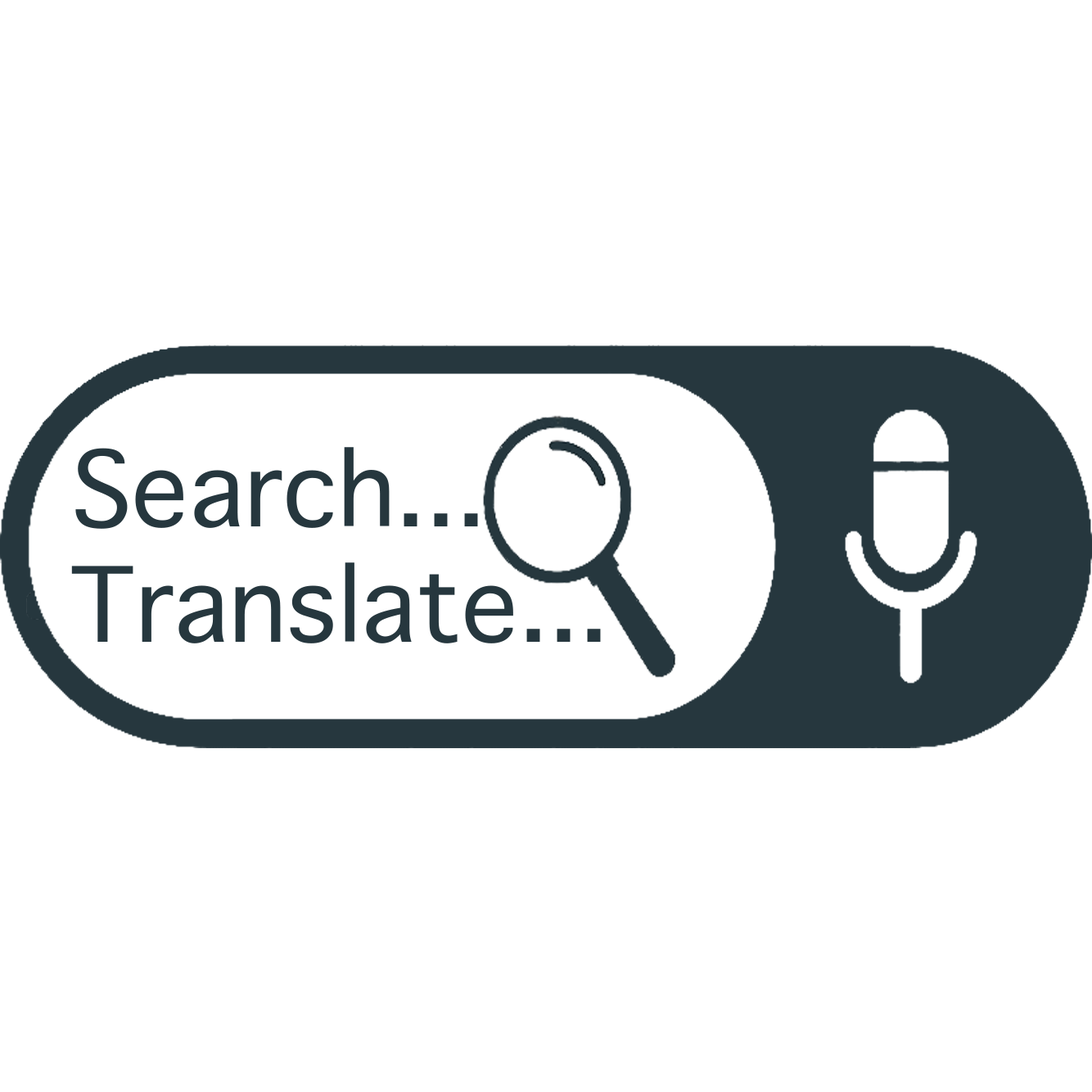
<style>
.page{position:relative;width:1092px;height:1092px;background:#ffffff}
.page>*{position:absolute;margin:0}
.t1{font:140.8px "AppleSymbols";color:#26373e}
</style>
<div class="page">
<p class="t1" style="left:75px;top:447px;width:403px;height:82px">Search...</p>
<p class="t1" style="left:71px;top:562px;width:530px;height:81px">Translate...</p>
</div>
